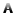
<style>
.page{position:relative;width:16px;height:16px;background:#ffffff}
.page>*{position:absolute;margin:0}
.t1{font:14px "Tahoma-Bold"}
</style>
<div class="page">
<p class="t1" style="left:3px;top:3px;width:10px;height:10px">A</p>
</div>
